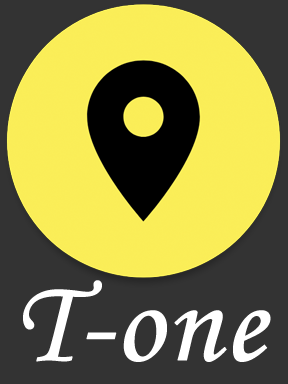
<style>
.page{position:relative;width:288px;height:384px;background:#333333}
.page>*{position:absolute;margin:0}
.t1{font:120px "MonotypeCorsiva";color:#ffffff;font-weight:bold}
</style>
<div class="page">
<p class="t1" style="left:23px;top:280px;width:248px;height:82px">T-one</p>
</div>
